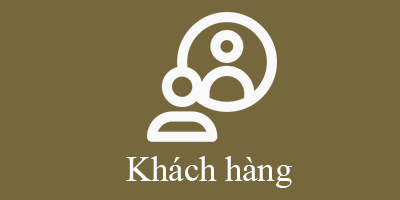
<style>
.page{position:relative;width:400px;height:200px;background:#76673d}
.page>*{position:absolute;margin:0}
.t1{font:34.5px "TimesNewRomanPSMT";color:#ffffff}
</style>
<div class="page">
<p class="t1" style="left:126px;top:156px;width:166px;height:32px">Khách hàng</p>
</div>
